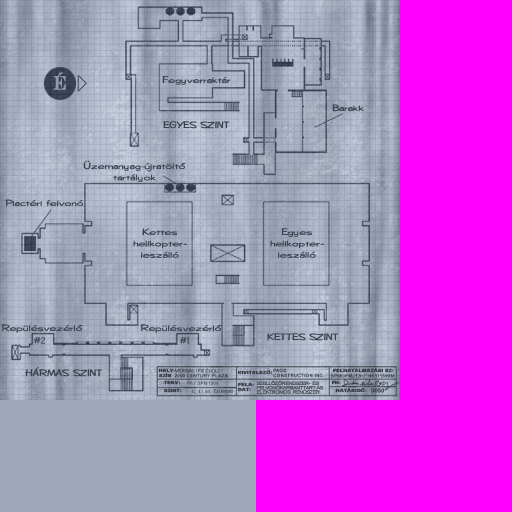
<style>
.page{position:relative;width:512px;height:512px;background:#ff00ff}
.page>*{position:absolute;margin:0}
.t1{font:19.5px "EngraversCE";color:#929bad;font-weight:bold;scale:0.81 1}
.t2{font:9.1px "DiegoCE";color:#3a4250;scale:1.4 1}
.t3{font:9.1px/11.4px "DiegoCE";color:#3a4250;scale:1.4 1}
.t4{font:4.1px/5.7px "Arial-BoldMT";color:#383a41;font-weight:bold;scale:1.3 1}
.t5{font:4.3px "ArialMT";letter-spacing:-0.1em;color:#5a5e65;font-weight:bold;scale:1.2 1}
.t6{font:4.1px "Arial-BoldMT";color:#383a41;font-weight:bold;scale:1.3 1}
.t7{font:4.5px/4.3px "ArialMT";letter-spacing:-0.1em;color:#4d515a;font-weight:bold;scale:1.2 1}
</style>
<div class="page">
<p class="t1" style="left:53px;top:72px;width:13px;height:18px">É</p>
<p class="t2" style="left:162px;top:76px;width:69px;height:9px">Fegyverraktár</p>
<p class="t2" style="left:332px;top:104px;width:32px;height:8px">Barakk</p>
<p class="t2" style="left:163px;top:120px;width:67px;height:9px">EGYES SZINT</p>
<p class="t3" style="left:83px;top:160px;width:103px;height:22px;text-align:center">Üzemanyag-újratöltő<br>tartályok</p>
<p class="t2" style="left:5px;top:199px;width:79px;height:8px">Piactéri felvonó</p>
<p class="t3" style="left:133px;top:228px;width:54px;height:30px;text-align:center">Kettes<br>helikopter-<br>leszálló</p>
<p class="t3" style="left:270px;top:228px;width:54px;height:30px;text-align:center">Egyes<br>helikopter-<br>leszálló</p>
<p class="t2" style="left:1px;top:324px;width:82px;height:9px">Repülésvezérlő</p>
<p class="t2" style="left:140px;top:324px;width:82px;height:9px">Repülésvezérlő</p>
<p class="t2" style="left:33px;top:337px;width:8px;height:7px">#</p>
<p class="t2" style="left:179px;top:337px;width:8px;height:7px">#</p>
<p class="t2" style="left:267px;top:333px;width:72px;height:8px">KETTES SZINT</p>
<p class="t2" style="left:25px;top:367px;width:77px;height:10px">HÁRMAS SZINT</p>
<p class="t4" style="left:158px;top:368px;width:18px;height:10px">HELY-<br>SZÍN</p>
<p class="t5" style="left:205px;top:368px;width:19px;height:5px">ÉPÜLET</p>
<p class="t6" style="left:238px;top:370px;width:35px;height:5px">KIVITELEZŐ:</p>
<p class="t6" style="left:333px;top:368px;width:61px;height:5px">FELHATALMAZÁSI SZ:</p>
<p class="t6" style="left:163px;top:380px;width:18px;height:5px">TERV:</p>
<p class="t6" style="left:163px;top:388px;width:19px;height:5px">SZINT:</p>
<p class="t5" style="left:213px;top:388px;width:21px;height:6px">Épülettető</p>
<p class="t4" style="left:238px;top:382px;width:17px;height:10px">FELA-<br>DAT:</p>
<p class="t7" style="left:256px;top:380px;width:68px;height:14px">SZELLŐZŐRENDSZER-  ÉS<br>FELVONÓKARBANTTART.ÁS<br>ELEKTROMOS  RENDSZER.</p>
<p class="t6" style="left:332px;top:380px;width:9px;height:5px">FH:</p>
<p class="t6" style="left:335px;top:388px;width:32px;height:5px">HATÁRIDŐ:</p>
</div>
